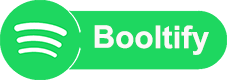
<style>
.page{position:relative;width:227px;height:80px;background:#1ed760}
.page>*{position:absolute;margin:0}
.t1{font:31.2px "Arial-BoldMT";color:#fcf8f8}
</style>
<div class="page">
<p class="t1" style="left:94px;top:25px;width:115px;height:30px">Booltify</p>
</div>
